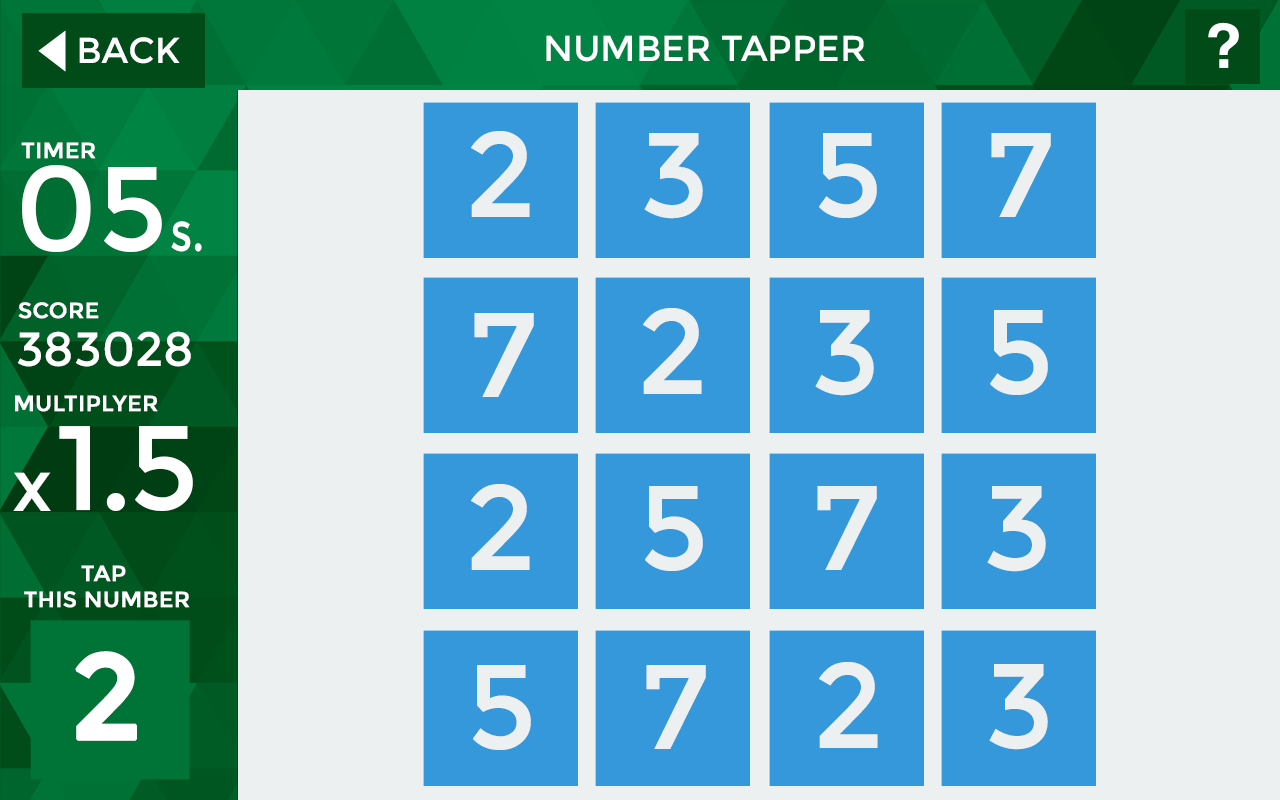
<style>
.page{position:relative;width:1280px;height:800px;background:#ecf0f1}
.page>*{position:absolute;margin:0}
.t1{font:36px "Montserrat-Regular";color:#ffffff}
.t2{font:36px "Montserrat-Regular";color:#ffffff;text-transform:uppercase}
.t3{font:120px "Montserrat-Regular";color:#ecf0f1}
.t4{font:22px "Montserrat-Regular";color:#ffffff;font-weight:bold}
.t5{font:120px "Montserrat-Regular";color:#ffffff}
.t6{font:55px "Montserrat-Regular";color:#ffffff;scale:0.8 1}
.t7{font:48px "Montserrat-Regular";color:#ffffff}
.t8{font:120px "Montserrat-Regular";letter-spacing:-0.025em;color:#ffffff}
.t9{font:72px "Montserrat-Regular";color:#ffffff}
.t10{font:22px "Montserrat-Regular";color:#ffffff;text-transform:uppercase;font-weight:bold}
.t11{font:120px "Montserrat-Regular";color:#ffffff;text-transform:uppercase;font-weight:bold}
</style>
<div class="page">
<p class="t1" style="left:79px;top:37px;width:101px;height:27px">BACK</p>
<p class="t2" style="left:546px;top:35px;width:319px;height:27px">Number Tapper</p>
<p class="t3" style="left:471px;top:131px;width:59px;height:86px">2</p>
<p class="t3" style="left:644px;top:133px;width:59px;height:86px">3</p>
<p class="t3" style="left:819px;top:133px;width:58px;height:85px">5</p>
<p class="t3" style="left:991px;top:133px;width:60px;height:84px">7</p>
<p class="t4" style="left:21px;top:142px;width:75px;height:17px">TIMER</p>
<p class="t5" style="left:22px;top:165px;width:140px;height:87px">05</p>
<p class="t6" style="left:171px;top:221px;width:31px;height:31px">s.</p>
<p class="t4" style="left:18px;top:302px;width:81px;height:17px">SCORE</p>
<p class="t3" style="left:474px;top:313px;width:60px;height:84px">7</p>
<p class="t3" style="left:643px;top:308px;width:59px;height:86px">2</p>
<p class="t3" style="left:815px;top:310px;width:59px;height:86px">3</p>
<p class="t3" style="left:990px;top:310px;width:58px;height:85px">5</p>
<p class="t7" style="left:17px;top:331px;width:174px;height:36px">383028</p>
<p class="t4" style="left:15px;top:395px;width:143px;height:17px">MULTIPLYER</p>
<p class="t8" style="left:59px;top:426px;width:134px;height:85px">1.5</p>
<p class="t9" style="left:13px;top:472px;width:38px;height:39px">x</p>
<p class="t3" style="left:471px;top:484px;width:59px;height:86px">2</p>
<p class="t3" style="left:645px;top:486px;width:58px;height:85px">5</p>
<p class="t3" style="left:817px;top:486px;width:60px;height:84px">7</p>
<p class="t3" style="left:987px;top:486px;width:59px;height:86px">3</p>
<p class="t10" style="left:24px;top:565px;width:166px;height:43px;text-align:center">Tap <br>this number</p>
<p class="t11" style="left:75px;top:651px;width:62px;height:90px">2</p>
<p class="t3" style="left:473px;top:665px;width:58px;height:85px">5</p>
<p class="t3" style="left:646px;top:665px;width:60px;height:84px">7</p>
<p class="t3" style="left:819px;top:662px;width:59px;height:86px">2</p>
<p class="t3" style="left:989px;top:664px;width:59px;height:86px">3</p>
</div>
